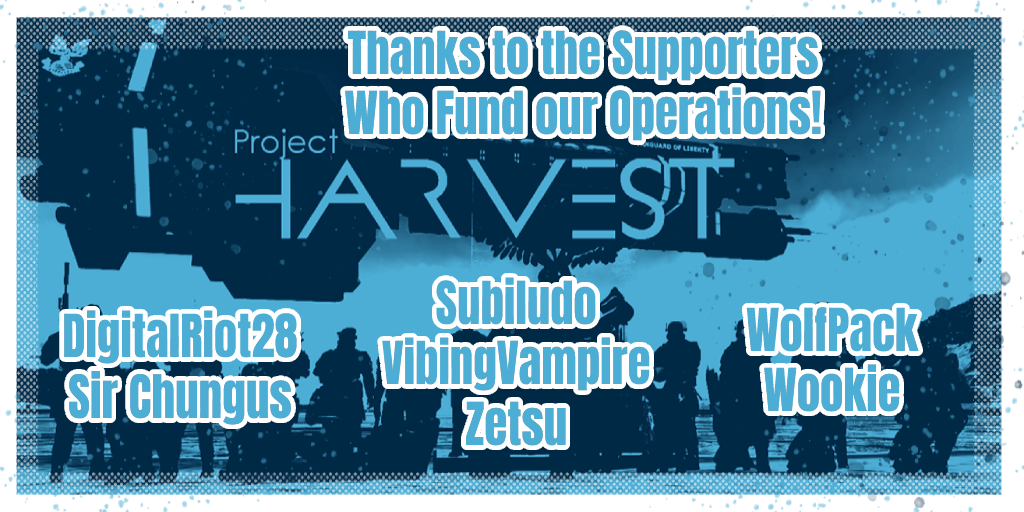
<style>
.page{position:relative;width:1024px;height:512px;background:#002946}
.page>*{position:absolute;margin:0}
.t1{font:50.4px "Impact";color:#4cadd5;scale:0.93 1}
.t2{font:50.9px "Impact";color:#4cadd5;scale:0.93 1}
</style>
<div class="page">
<p class="t1" style="left:345px;top:30px;width:476px;height:111px;text-align:center">Thanks to the Supporters<br>Who Fund our Operations!</p>
<p class="t1" style="left:64px;top:310px;width:233px;height:115px;text-align:center">DigitalRiot28<br><span class="t2">Sir Chungus</span></p>
<p class="t1" style="left:746px;top:307px;width:173px;height:105px;text-align:center">WolfPack<br>Wookie</p>
</div>
